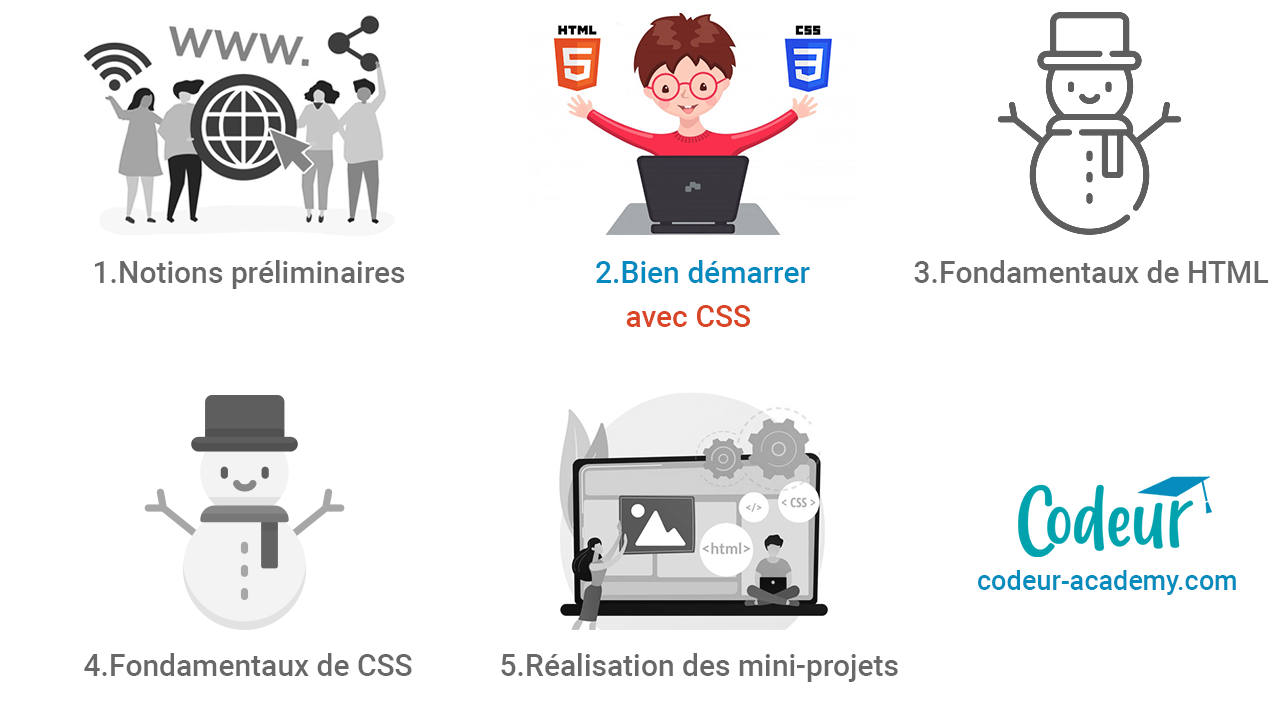
<style>
.page{position:relative;width:1280px;height:720px;background:#ffffff}
.page>*{position:absolute;margin:0}
.t1{font:30px "Roboto-Medium";color:#686868}
.t2{font:30px "Roboto-Medium";color:#048abf}
.t3{font:30px "Roboto-Medium";color:#d94625}
.t4{font:27px "Roboto-Medium";color:#068dbd}
</style>
<div class="page">
<p class="t1" style="left:95px;top:260px;width:310px;height:29px">1.Notions préliminaires</p>
<p class="t2" style="left:596px;top:260px;width:214px;height:23px">2.Bien démarrer</p>
<p class="t1" style="left:914px;top:260px;width:355px;height:23px">3.Fondamentaux de HTML</p>
<p class="t3" style="left:626px;top:305px;width:124px;height:22px">avec CSS</p>
<p class="t4" style="left:978px;top:570px;width:258px;height:25px">codeur-academy.com</p>
<p class="t1" style="left:84px;top:653px;width:328px;height:23px">4.Fondamentaux de CSS</p>
<p class="t1" style="left:501px;top:653px;width:397px;height:29px">5.Réalisation des mini-projets</p>
</div>
